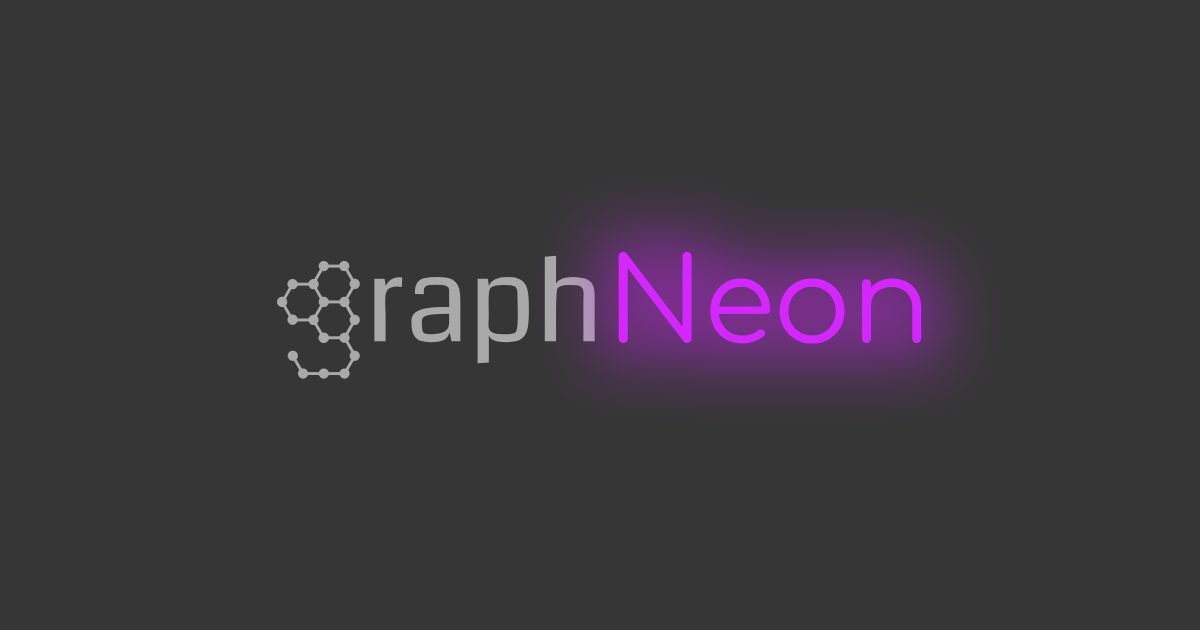
<style>
.page{position:relative;width:1200px;height:630px;background:#363636}
.page>*{position:absolute;margin:0}
.t1{font:116.7px "Coda-Regular";color:#a9a9a9}
.t2{font:116.7px "Coda-Regular";color:#363636}
.t3{font:116.7px "Comfortaa-Regular";color:#d426ff}
</style>
<div class="page">
<p class="t1" style="left:306px;top:255px;width:289px;height:109px"><span class="t2">g</span>raph</p>
<p class="t3" style="left:618px;top:251px;width:304px;height:93px">Neon</p>
</div>
